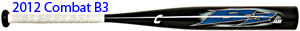
<style>
.page{position:relative;width:300px;height:31px;background:#ffffff}
.page>*{position:absolute;margin:0}
.t1{font:14px "MyriadPro-Regular";color:#0000ff}
</style>
<div class="page">
<p class="t1" style="left:12px;top:2px;width:96px;height:10px">2012 Combat B3</p>
</div>
